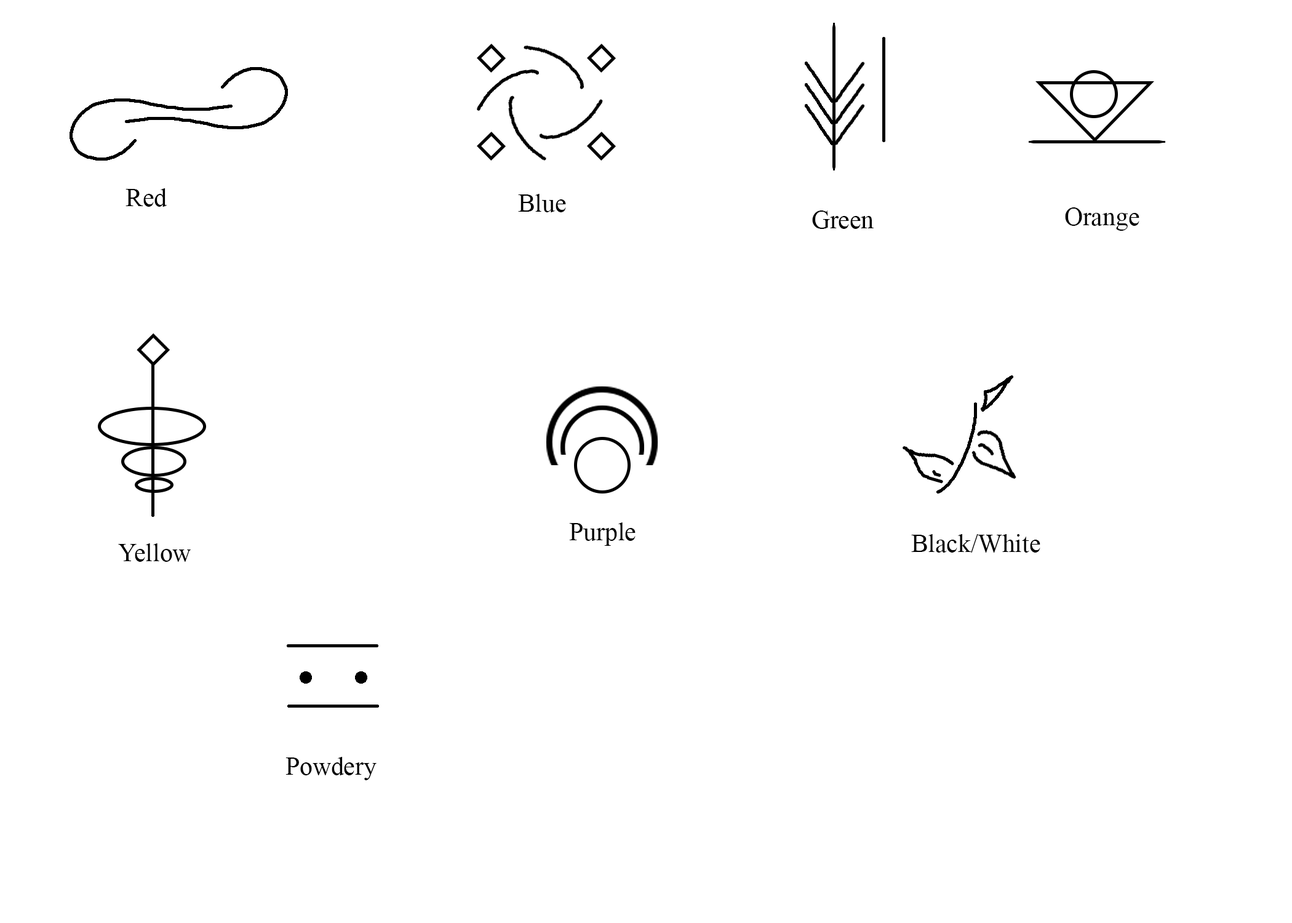
<style>
.page{position:relative;width:1292px;height:923px;background:#ffffff}
.page>*{position:absolute;margin:0}
.t1{font:25.6px "TimesNewRomanPSMT";color:#000000}
</style>
<div class="page">
<p class="t1" style="left:126px;top:188px;width:41px;height:19px">Red</p>
<p class="t1" style="left:518px;top:194px;width:48px;height:18px">Blue</p>
<p class="t1" style="left:1065px;top:207px;width:74px;height:24px">Orange</p>
<p class="t1" style="left:812px;top:210px;width:62px;height:19px">Green</p>
<p class="t1" style="left:569px;top:522px;width:67px;height:24px">Purple</p>
<p class="t1" style="left:118px;top:543px;width:73px;height:19px">Yellow</p>
<p class="t1" style="left:911px;top:534px;width:129px;height:19px">Black/White</p>
<p class="t1" style="left:285px;top:757px;width:92px;height:23px">Powdery</p>
</div>
